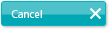
<style>
.page{position:relative;width:110px;height:30px;background:#4dc2cb}
.page>*{position:absolute;margin:0}
.t1{font:11px "MyriadPro-Regular";color:#ffffff}
</style>
<div class="page">
<p class="t1" style="left:11px;top:10px;width:31px;height:8px">Cancel</p>
</div>
